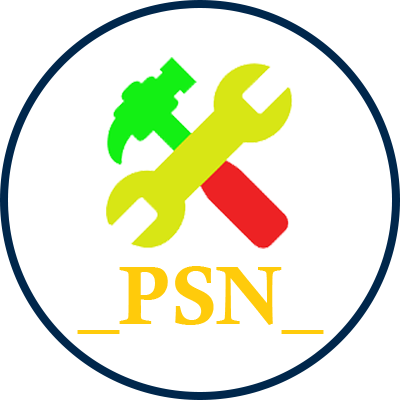
<style>
.page{position:relative;width:400px;height:400px;background:#ffffff}
.page>*{position:absolute;margin:0}
.t1{font:82px "CalisMTBol";color:#ffcb0b}
</style>
<div class="page">
<p class="t1" style="left:77px;top:266px;width:247px;height:68px">_PSN_</p>
</div>
